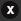
<style>
.page{position:relative;width:21px;height:21px;background:#131111}
.page>*{position:absolute;margin:0}
.t1{font:11.2px "Helvetica-Bold";color:#f6f3f3}
</style>
<div class="page">
<p class="t1" style="left:7px;top:6px;width:7px;height:8px">X</p>
</div>
